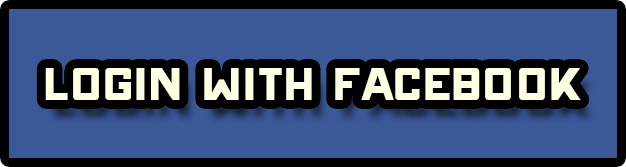
<style>
.page{position:relative;width:626px;height:167px;background:#3b5997}
.page>*{position:absolute;margin:0}
.t1{font:72.6px "ONRAMP";color:#ffffe3}
</style>
<div class="page">
<p class="t1" style="left:45px;top:68px;width:536px;height:32px">login with facebook</p>
</div>
